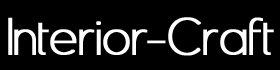
<style>
.page{position:relative;width:280px;height:70px;background:#000000}
.page>*{position:absolute;margin:0}
.t1{font:62px "Asenine";color:#ffffff;font-weight:bold}
</style>
<div class="page">
<p class="t1" style="left:8px;top:17px;width:266px;height:39px">Interior-Craft</p>
</div>
